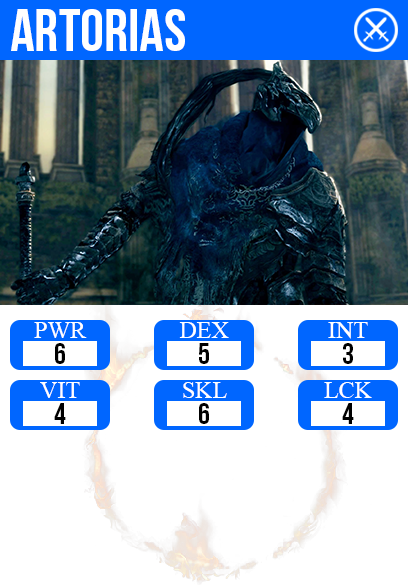
<style>
.page{position:relative;width:408px;height:585px;background:#ffffff}
.page>*{position:absolute;margin:0}
.t1{font:60px "BebasNeue";color:#ffffff}
.t2{font:24px "TimesNewRomanPSMT";color:#ffffff}
.t3{font:30px "BebasNeue";color:#000000}
</style>
<div class="page">
<p class="t1" style="left:11px;top:9px;width:174px;height:42px">artorias</p>
<p class="t2" style="left:34px;top:322px;width:53px;height:16px">PWR</p>
<p class="t2" style="left:179px;top:322px;width:50px;height:16px">DEX</p>
<p class="t2" style="left:328px;top:322px;width:40px;height:17px">INT</p>
<p class="t3" style="left:55px;top:343px;width:10px;height:21px">6</p>
<p class="t3" style="left:199px;top:343px;width:10px;height:21px">5</p>
<p class="t3" style="left:343px;top:343px;width:10px;height:21px">3</p>
<p class="t2" style="left:40px;top:382px;width:40px;height:16px">VIT</p>
<p class="t2" style="left:183px;top:382px;width:44px;height:16px">SKL</p>
<p class="t2" style="left:324px;top:382px;width:48px;height:16px">LCK</p>
<p class="t3" style="left:54px;top:403px;width:12px;height:21px">4</p>
<p class="t3" style="left:199px;top:403px;width:10px;height:21px">6</p>
<p class="t3" style="left:342px;top:403px;width:12px;height:21px">4</p>
</div>
